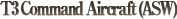
<style>
.page{position:relative;width:177px;height:19px;background:#ffffff}
.page>*{position:absolute;margin:0}
.t1{font:18px "RyuminPro-ExBold";letter-spacing:-0.14em;color:#4a3f32;font-weight:bold;scale:0.86 1}
</style>
<div class="page">
<p class="t1" style="left:0px;top:1px;width:178px;height:18px">T3 Command Aircraft (ASW)</p>
</div>
